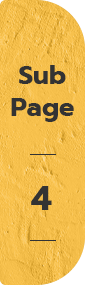
<style>
.page{position:relative;width:85px;height:285px}
.page>*{position:absolute;margin:0}
.t1{font:26.5px "Prompt-Bold";color:#333333}
.t2{font:34.9px "Prompt-Bold";color:#333333}
</style>
<div class="page">
<p class="t1" style="left:11px;top:65px;width:63px;height:57px;text-align:center">Sub<br>Page</p>
<p class="t2" style="left:31px;top:186px;width:21px;height:24px">4</p>
</div>
